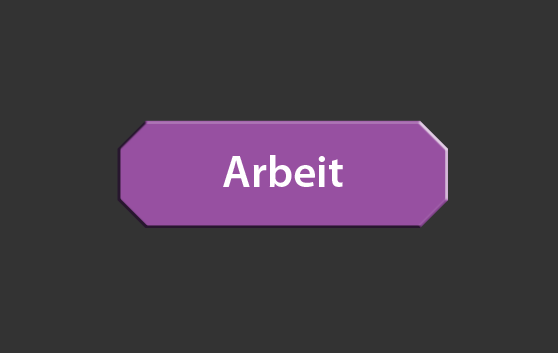
<style>
.page{position:relative;width:558px;height:353px;background:#333333}
.page>*{position:absolute;margin:0}
.t1{font:45px "MyriadPro-Semibold";color:#ffffff}
</style>
<div class="page">
<p class="t1" style="left:223px;top:155px;width:120px;height:32px">Arbeit</p>
</div>
